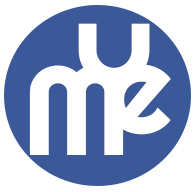
<style>
.page{position:relative;width:195px;height:192px;background:#ffffff}
.page>*{position:absolute;margin:0}
.t1{font:126.1px "Righteous-Regular";letter-spacing:0.12em;color:#ffffff}
.t2{font:126.1px "Righteous-Regular";letter-spacing:0.12em;color:#ffffff;scale:1.06 1}
.t3{font:126.1px "Righteous-Regular";letter-spacing:0.12em;color:#fefeff;scale:1.06 1}
</style>
<div class="page">
<p class="t1" style="left:78px;top:23px;width:72px;height:89px">Y</p>
<p class="t2" style="left:29px;top:65px;width:95px;height:90px">M</p>
<p class="t3" style="left:106px;top:64px;width:65px;height:71px">e</p>
</div>
